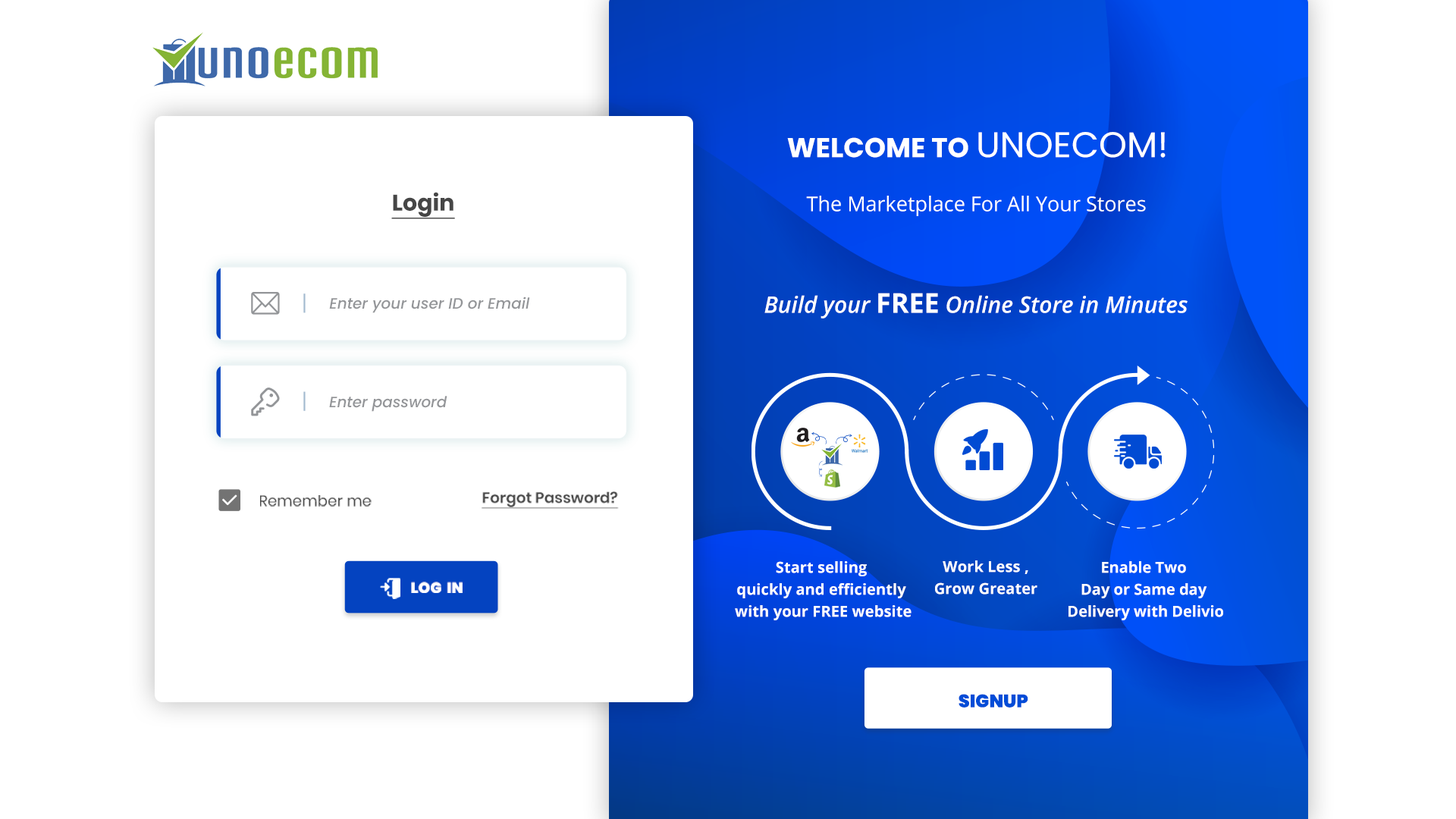
<style>
.page{position:relative;width:1456px;height:819px;background:#ffffff}
.page>*{position:absolute;margin:0}
.t1{font:27.3px "Poppins-Bold";color:#ffffff;text-transform:uppercase}
.t2{font:35.6px "Poppins-Regular";color:#ffffff;text-transform:uppercase}
.t3{font:22.7px "Poppins-Bold";color:#464646;text-decoration:underline}
.t4{font:20.5px "OpenSans-Regular";color:#ffffff}
.t5{font:22.7px "OpenSans-SemiBoldItalic";color:#ffffff}
.t6{font:27.3px "OpenSans-Bold";color:#ffffff}
.t7{font:15.1px "Poppins-MediumItalic";color:#939598}
.t8{font:15.1px "Poppins-Regular";color:#464646}
.t9{font:15.1px "Poppins-SemiBold";color:#464646;text-decoration:underline}
.t10{font:15.2px/22px "OpenSans-Bold";letter-spacing:0.005em;color:#ffffff}
.t11{font:15.2px/22px "OpenSans-Bold";color:#ffffff}
.t12{font:15.1px "Poppins-Black";color:#ffffff}
.t13{font:18.2px "Poppins-Black";color:#014cd7}
</style>
<div class="page">
<p class="t1" style="left:787px;top:132px;width:379px;height:26px">Welcome to <span class="t2">UNOECOM!</span></p>
<p class="t3" style="left:391px;top:192px;width:64px;height:27px">Login</p>
<p class="t4" style="left:806px;top:196px;width:340px;height:20px">The Marketplace For All Your Stores</p>
<p class="t5" style="left:764px;top:293px;width:424px;height:25px">Build your <span class="t6">FREE </span>Online Store in Minutes</p>
<p class="t7" style="left:329px;top:297px;width:201px;height:16px">Enter your user ID or Email</p>
<p class="t7" style="left:329px;top:396px;width:118px;height:16px">Enter password</p>
<p class="t8" style="left:260px;top:495px;width:112px;height:12px">Remember me</p>
<p class="t9" style="left:482px;top:491px;width:137px;height:18px">Forgot Password?</p>
<p class="t10" style="left:735px;top:561px;width:177px;height:59px;text-align:center">Start selling <br>quickly and efficiently <br>with your FREE website</p>
<p class="t10" style="left:935px;top:560px;width:102px;height:35px;text-align:center">Work Less , <br>Grow Greater</p>
<p class="t11" style="left:1068px;top:561px;width:155px;height:59px;text-align:center">Enable Two <br>Day or Same day <br>Delivery with Delivio</p>
<p class="t12" style="left:411px;top:582px;width:52px;height:11px">LOG  IN</p>
<p class="t13" style="left:959px;top:694px;width:69px;height:14px">SIGNUP</p>
</div>
